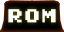
<style>
.page{position:relative;width:64px;height:32px;background:#ffffff}
.page>*{position:absolute;margin:0}
.t1{font:17px "Early-GameBoy";color:#ffffff}
</style>
<div class="page">
<p class="t1" style="left:8px;top:9px;width:48px;height:14px">ROM</p>
</div>
